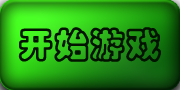
<style>
.page{position:relative;width:180px;height:90px}
.page>*{position:absolute;margin:0}
.t1{font:35px "STCaiyun";color:#031300;font-weight:bold}
</style>
<div class="page">
<p class="t1" style="left:18px;top:27px;width:143px;height:35px">开始游戏</p>
</div>
